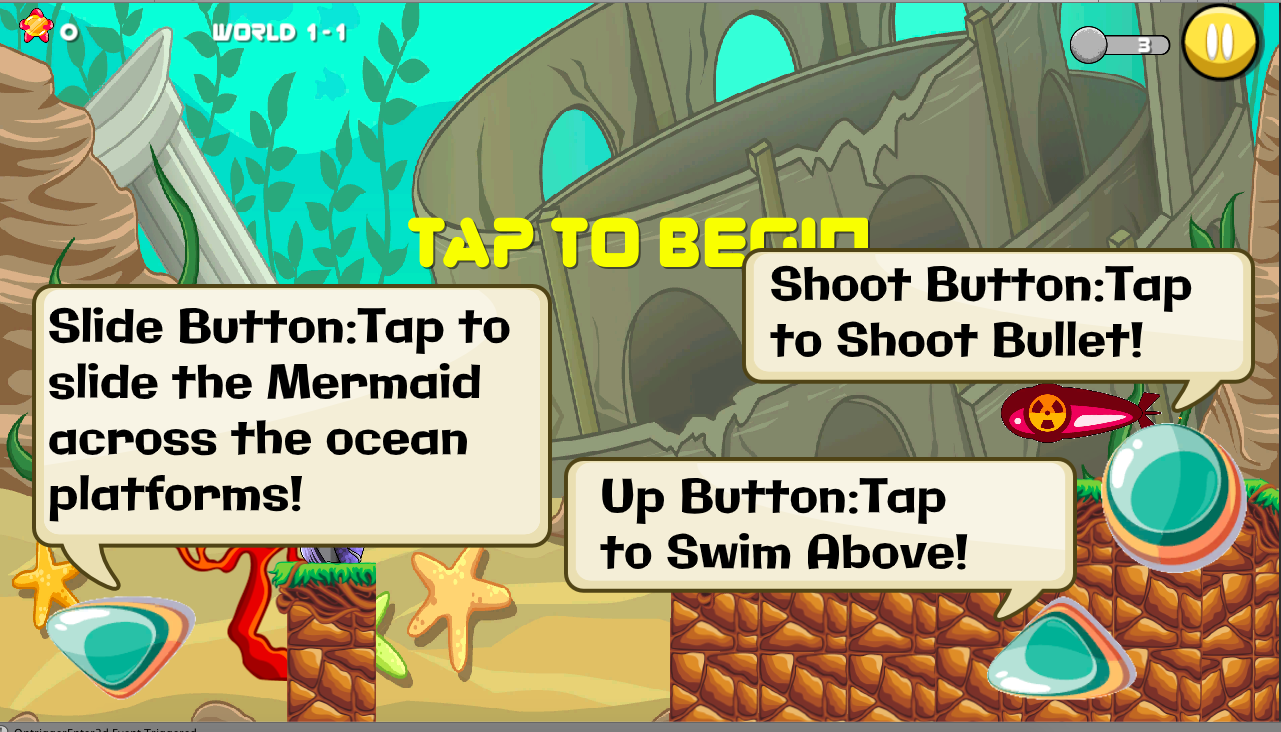
<style>
.page{position:relative;width:1281px;height:732px}
.page>*{position:absolute;margin:0}
.t1{font:46.5px "Galindo-Regular";color:#000000}
</style>
<div class="page">
<p class="t1" style="left:770px;top:265px;width:422px;height:93px">Shoot Button:Tap <br>to Shoot Bullet!</p>
<p class="t1" style="left:48px;top:307px;width:462px;height:215px">Slide Button:Tap to <br>slide the Mermaid <br>across the ocean <br>platforms!</p>
<p class="t1" style="left:600px;top:478px;width:368px;height:92px">Up Button:Tap <br>to Swim Above!</p>
</div>
